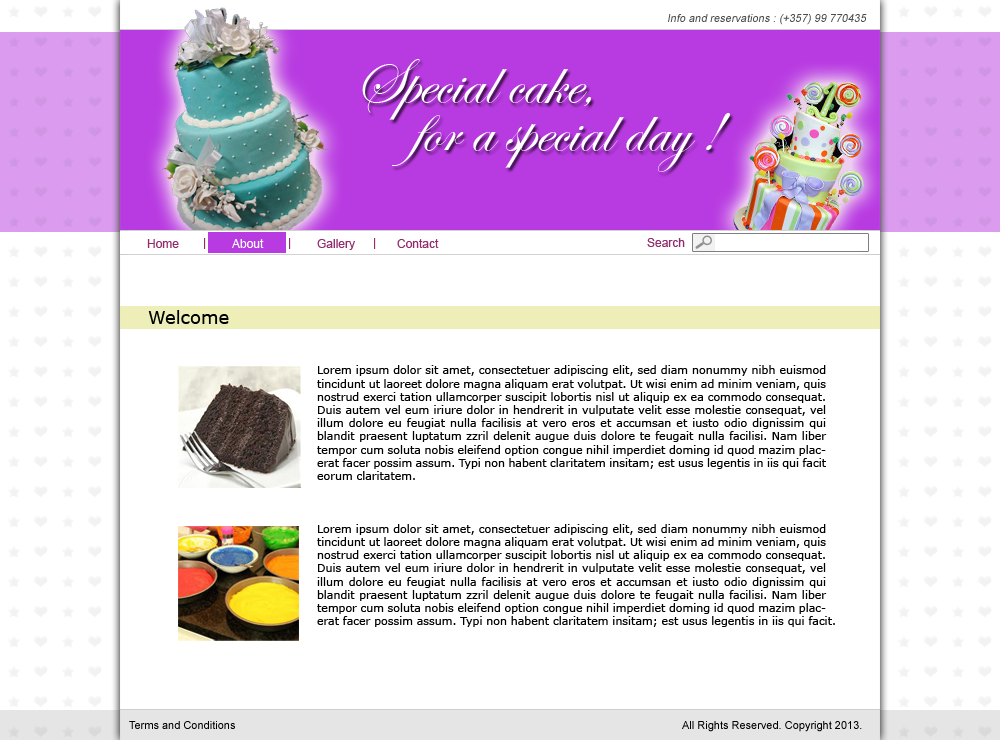
<style>
.page{position:relative;width:1000px;height:740px;background:#ffffff}
.page>*{position:absolute;margin:0}
.t1{font:11px "ArialMT";color:#4c4c4c;font-style:italic}
.t2{font:66px/48px "EdwardianScriptITC";color:#ffffff}
.t3{font:12px "ArialMT";color:#932b6d}
.t4{font:12px "ArialMT";color:#ffffff}
.t5{font:18px "Verdana";color:#000000}
.t6{font:11px "Verdana";color:#000000}
.t7{font:11px "ArialMT";color:#000000}
</style>
<div class="page">
<p class="t1" style="left:668px;top:14px;width:199px;height:11px">Info and reservations : (+357) 99 770435</p>
<p class="t2" style="left:362px;top:59px;width:369px;height:113px">Special cake,<br>     for a special day !</p>
<p class="t3" style="left:147px;top:239px;width:32px;height:9px">Home</p>
<p class="t3" style="left:204px;top:238px;width:2px;height:11px">|</p>
<p class="t4" style="left:232px;top:239px;width:32px;height:9px">About</p>
<p class="t3" style="left:289px;top:238px;width:2px;height:11px">|</p>
<p class="t3" style="left:317px;top:239px;width:38px;height:11px">Gallery</p>
<p class="t3" style="left:374px;top:238px;width:2px;height:11px">|</p>
<p class="t3" style="left:397px;top:239px;width:42px;height:9px">Contact</p>
<p class="t3" style="left:647px;top:238px;width:38px;height:9px">Search</p>
<p class="t5" style="left:148px;top:310px;width:81px;height:14px">Welcome</p>
<p class="t6" style="left:317px;top:365px;width:518px;height:262px;text-align:justify">Lorem ipsum dolor sit amet, consectetuer adipiscing elit, sed diam nonummy nibh euismod tincidunt ut laoreet dolore magna aliquam erat volutpat. Ut wisi enim ad minim veniam, quis nostrud exerci tation ullamcorper suscipit lobortis nisl ut aliquip ex ea commodo consequat. Duis autem vel eum iriure dolor in hendrerit in vulputate velit esse molestie consequat, vel illum dolore eu feugiat nulla facilisis at vero eros et accumsan et iusto odio dignissim qui blandit praesent luptatum zzril delenit augue duis dolore te feugait nulla facilisi. Nam liber tempor cum soluta nobis eleifend option congue nihil imperdiet doming id quod mazim placerat facer possim assum. Typi non habent claritatem insitam; est usus legentis in iis qui facit eorum claritatem. <br><br><br><br>Lorem ipsum dolor sit amet, consectetuer adipiscing elit, sed diam nonummy nibh euismod tincidunt ut laoreet dolore magna aliquam erat volutpat. Ut wisi enim ad minim veniam, quis nostrud exerci tation ullamcorper suscipit lobortis nisl ut aliquip ex ea commodo consequat. Duis autem vel eum iriure dolor in hendrerit in vulputate velit esse molestie consequat, vel illum dolore eu feugiat nulla facilisis at vero eros et accumsan et iusto odio dignissim qui blandit praesent luptatum zzril delenit augue duis dolore te feugait nulla facilisi. Nam liber tempor cum soluta nobis eleifend option congue nihil imperdiet doming id quod mazim placerat facer possim assum. Typi non habent claritatem insitam; est usus legentis in iis qui facit.</p>
<p class="t7" style="left:129px;top:721px;width:106px;height:8px">Terms and Conditions</p>
<p class="t7" style="left:682px;top:721px;width:180px;height:11px">All Rights Reserved. Copyright 2013.</p>
</div>
